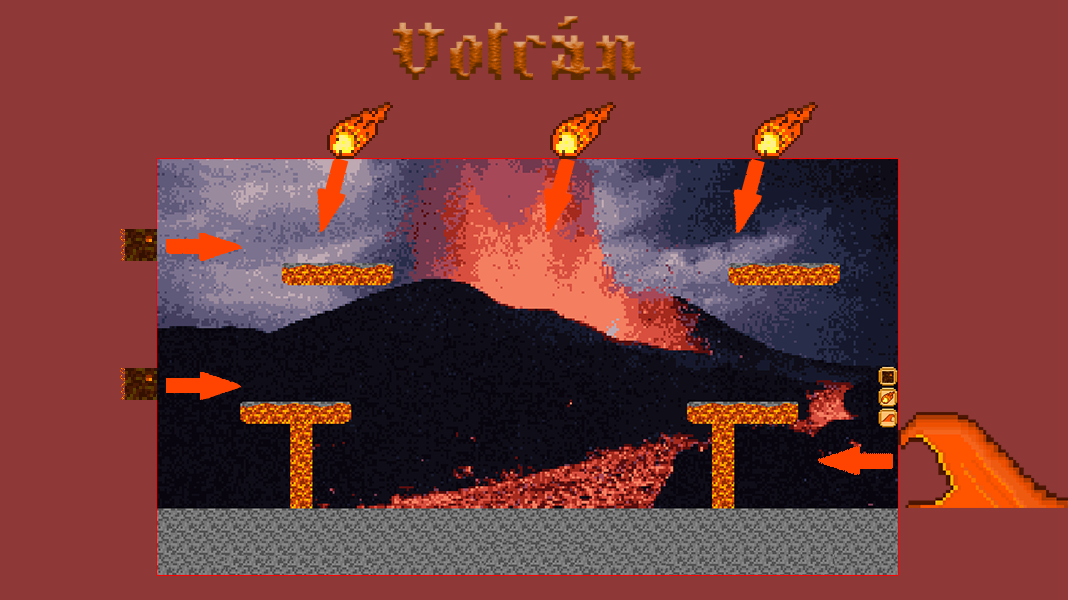
<style>
.page{position:relative;width:1068px;height:600px;background:#8e3838}
.page>*{position:absolute;margin:0}
.t1{font:101.5px "OwreKynge"}
</style>
<div class="page">
<p class="t1" style="left:393px;top:16px;width:248px;height:64px">Volcán</p>
</div>
